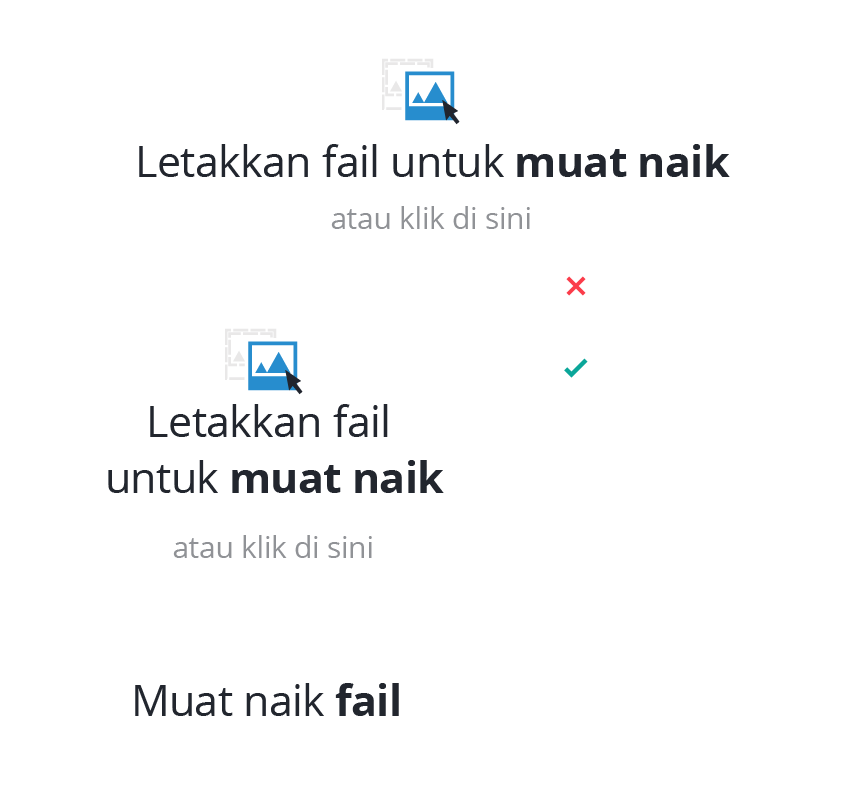
<style>
.page{position:relative;width:856px;height:812px;background:#ffffff}
.page>*{position:absolute;margin:0}
.t1{font:42.6px "OpenSans";letter-spacing:-0.01em;color:#22262e}
.t2{font:42.6px "OpenSans-Bold";letter-spacing:-0.01em;color:#22262e}
.t3{font:30px "OpenSans";letter-spacing:-0.01em;color:#909296}
.t4{font:42.6px/56.2px "OpenSans";letter-spacing:-0.01em;color:#22262e}
.t5{font:42.6px/56.2px "OpenSans-Bold";letter-spacing:-0.01em;color:#22262e}
</style>
<div class="page">
<p class="t1" style="left:139px;top:144px;width:591px;height:33px">Letakkan fail untuk <span class="t2">muat naik</span></p>
<p class="t3" style="left:331px;top:206px;width:199px;height:23px">atau klik di sini</p>
<p class="t4" style="left:108px;top:404px;width:336px;height:89px;text-align:center">Letakkan fail <br>untuk <span class="t5">muat naik</span></p>
<p class="t3" style="left:173px;top:535px;width:199px;height:23px">atau klik di sini</p>
<p class="t1" style="left:135px;top:683px;width:264px;height:33px">Muat naik<span class="t2"> fail</span></p>
</div>
